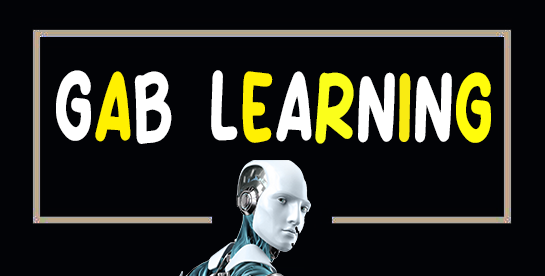
<style>
.page{position:relative;width:545px;height:276px;background:#020306}
.page>*{position:absolute;margin:0}
.t1{font:79.8px "Nice-Sugar";color:#ffffff;scale:0.73 1}
.t2{font:79.8px "Nice-Sugar";color:#fff000;scale:0.73 1}
.t3{font:79.8px "Nice-Sugar";color:#fff002;scale:0.73 1}
.t4{font:79.8px "Nice-Sugar";color:#fbfe1b;scale:0.73 1}
.t5{font:79.8px "Nice-Sugar";color:#f9eb12;scale:0.73 1}
.t6{font:79.8px "Nice-Sugar";color:#fffc0b;scale:0.73 1}
</style>
<div class="page">
<p class="t1" style="left:56px;top:70px;width:435px;height:74px">G<span class="t2">A</span>B  L<span class="t3">E</span>A<span class="t4">R</span>N<span class="t5">I</span>N<span class="t6">G</span></p>
</div>
